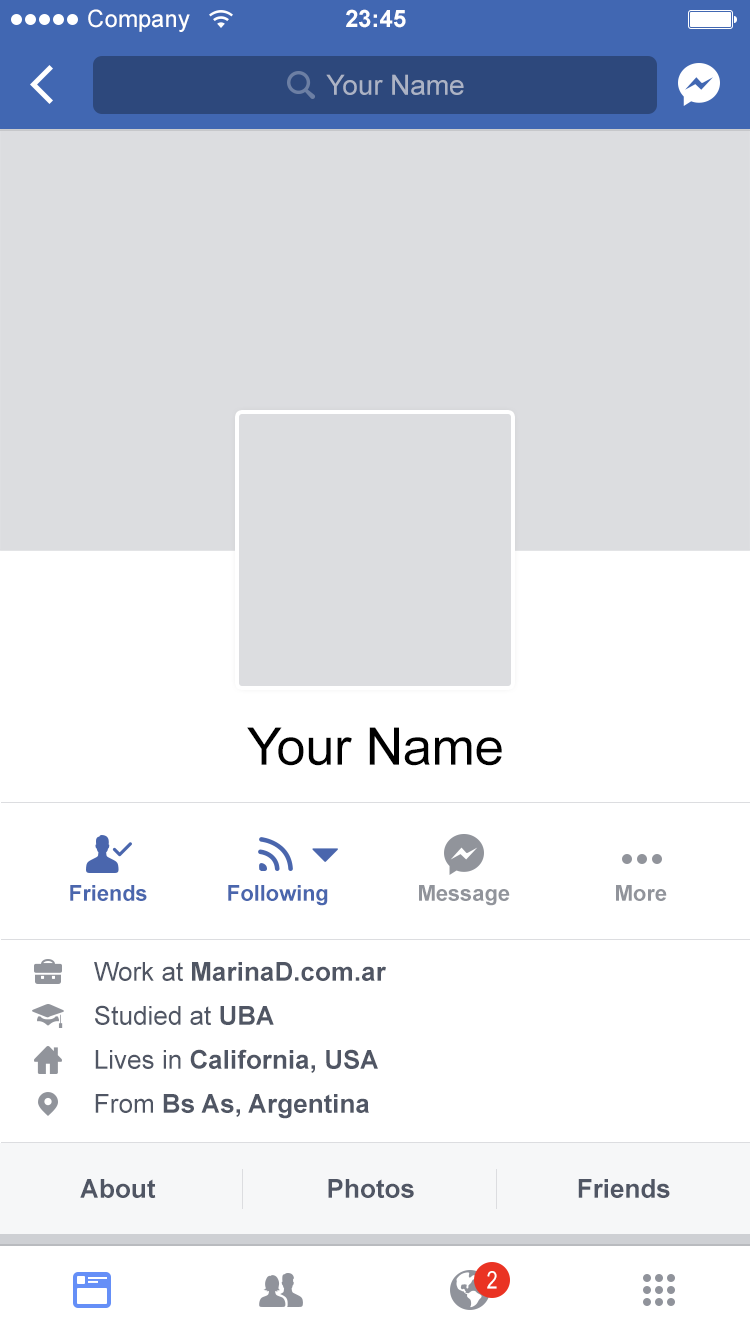
<style>
.page{position:relative;width:750px;height:1334px;background:#ffffff}
.page>*{position:absolute;margin:0}
.t1{font:24px "ArialMT";color:#ffffff}
.t2{font:24px "Arial-BoldMT";color:#ffffff}
.t3{font:28px "ArialMT";letter-spacing:-0.005em;color:#acb3c5}
.t4{font:52px "ArialMT";letter-spacing:-0.005em;color:#000000}
.t5{font:22px "Arial-BoldMT";letter-spacing:-0.005em;color:#4a66ad}
.t6{font:22px "Arial-BoldMT";letter-spacing:-0.005em;color:#91949b}
.t7{font:26px "Arial-BoldMT";color:#505664}
.t8{font:26px "ArialMT";color:#505664}
.t9{font:24px "ArialNarrow";color:#ffffff}
</style>
<div class="page">
<p class="t1" style="left:88px;top:9px;width:102px;height:23px">Company</p>
<p class="t2" style="left:346px;top:9px;width:60px;height:19px">23:45</p>
<p class="t3" style="left:326px;top:74px;width:138px;height:21px">Your Name</p>
<p class="t4" style="left:247px;top:727px;width:255px;height:39px">Your Name</p>
<p class="t5" style="left:70px;top:885px;width:77px;height:16px">Friends</p>
<p class="t5" style="left:228px;top:885px;width:100px;height:21px">Following</p>
<p class="t6" style="left:419px;top:885px;width:91px;height:21px">Message</p>
<p class="t6" style="left:616px;top:885px;width:51px;height:16px">More</p>
<p class="t7" style="left:94px;top:962px;width:292px;height:19px"><span class="t8">Work at </span>MarinaD.com.ar</p>
<p class="t8" style="left:95px;top:1005px;width:179px;height:20px">Studied at <span class="t7">UBA</span></p>
<p class="t7" style="left:95px;top:1049px;width:283px;height:24px"><span class="t8">Lives in </span>California, USA</p>
<p class="t7" style="left:95px;top:1094px;width:274px;height:25px"><span class="t8">From </span>Bs As, Argentina</p>
<p class="t7" style="left:80px;top:1179px;width:76px;height:19px">About</p>
<p class="t7" style="left:328px;top:1179px;width:86px;height:19px">Photos</p>
<p class="t7" style="left:578px;top:1179px;width:92px;height:19px">Friends</p>
<p class="t9" style="left:487px;top:1271px;width:10px;height:18px">2</p>
</div>
